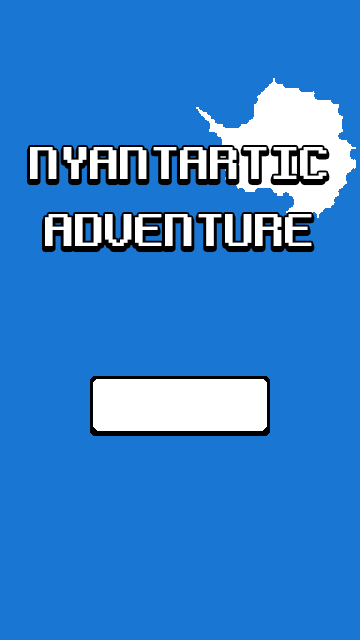
<style>
.page{position:relative;width:360px;height:640px;background:#1976d2}
.page>*{position:absolute;margin:0}
.t1{font:12.3px/66.7px "NeoDunggeunmo-Regular";color:#ffffff;scale:1.17 1}
</style>
<div class="page">
<p class="t1" style="left:30px;top:147px;width:297px;height:99px;text-align:center">NYANTARTIC<br>ADVENTURE</p>
</div>
